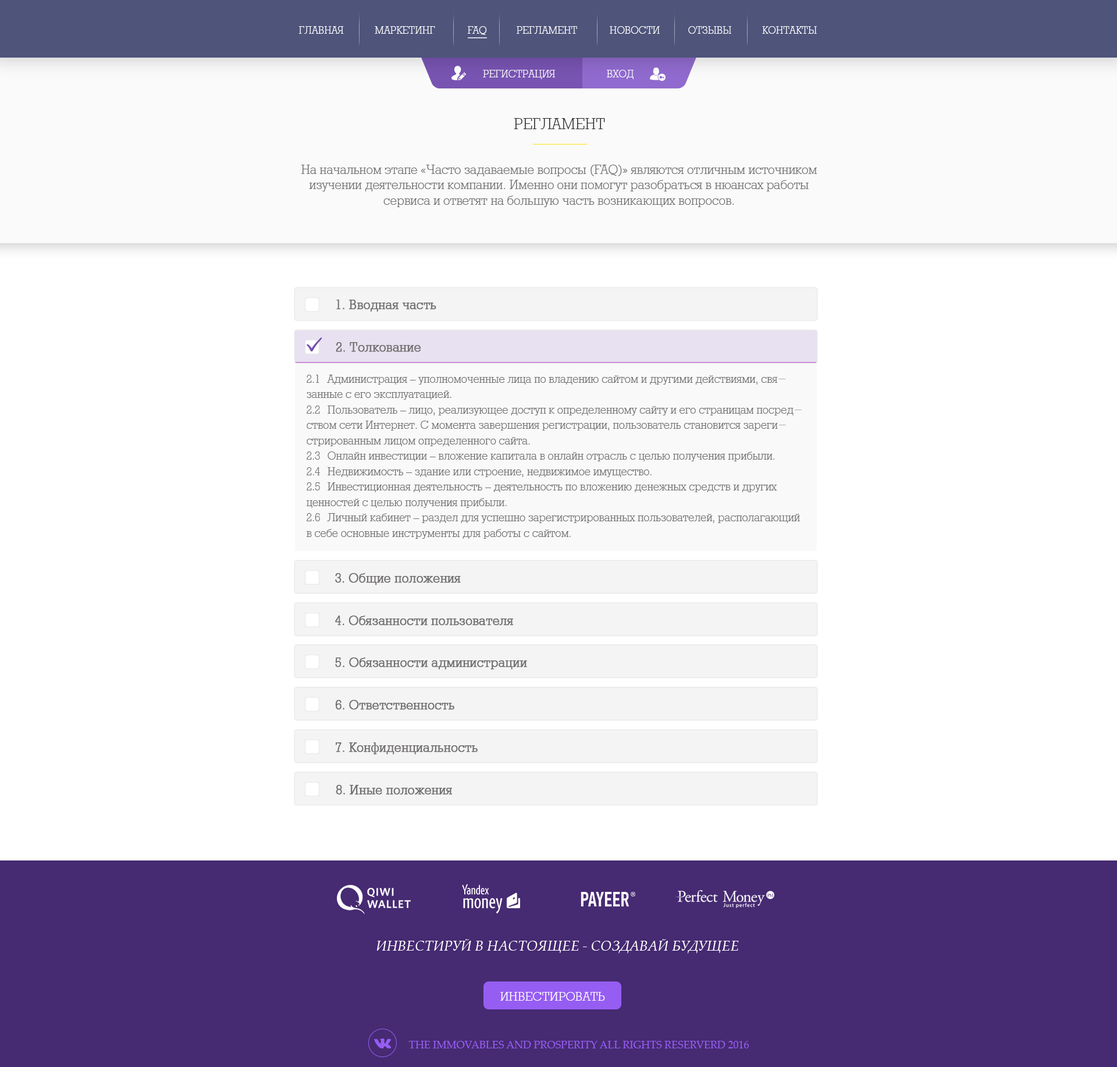
<style>
.page{position:relative;width:1117px;height:1067px;background:#ffffff}
.page>*{position:absolute;margin:0}
.t1{font:11.6px "Rodeo95";color:#ffffff;text-transform:uppercase}
.t2{font:17.5px "Rodeo95";color:#282828}
.t3{font:14.5px/15.4px "Rodeo95";color:#726f6f}
.t4{font:14.5px "Rodeo95";color:#726f6f;font-weight:bold}
.t5{font:12.8px/15.4px "Rodeo95";color:#726f6f}
.t6{font:14px "PalatinoLinotype-Italic";color:#ffffff;text-transform:uppercase}
.t7{font:14px "Rodeo95";color:#ffffff;text-transform:uppercase}
.t8{font:10.5px "PalatinoLinotype-Roman";color:#965df2;text-transform:uppercase}
</style>
<div class="page">
<p class="t1" style="left:299px;top:26px;width:45px;height:8px">Главная</p>
<p class="t1" style="left:375px;top:26px;width:60px;height:8px">МАРКЕТИНГ</p>
<p class="t1" style="left:467px;top:26px;width:20px;height:9px">FAQ</p>
<p class="t1" style="left:517px;top:26px;width:60px;height:8px">РЕГЛАМЕНТ</p>
<p class="t1" style="left:610px;top:26px;width:50px;height:8px">НОВОСТИ</p>
<p class="t1" style="left:688px;top:26px;width:43px;height:8px">Отзывы</p>
<p class="t1" style="left:762px;top:26px;width:55px;height:8px">КОНТАКТЫ</p>
<p class="t1" style="left:483px;top:70px;width:72px;height:9px">РЕГИСТРАЦИЯ</p>
<p class="t1" style="left:607px;top:70px;width:27px;height:9px">ВХОД</p>
<p class="t2" style="left:514px;top:118px;width:91px;height:11px">РЕГЛАМЕНТ</p>
<p class="t3" style="left:301px;top:165px;width:517px;height:42px;text-align:center">На начальном этапе «Часто задаваемые вопросы (FAQ)» являются отличным источником изучении деятельности компании. Именно они помогут разобраться в нюансах работы сервиса и ответят на большую часть возникающих вопросов.</p>
<p class="t4" style="left:336px;top:300px;width:100px;height:12px">1. Вводная часть</p>
<p class="t4" style="left:336px;top:342px;width:85px;height:10px">2. Толкование</p>
<p class="t5" style="left:307px;top:375px;width:495px;height:164px">2.1 Администрация – уполномоченные лица по владению сайтом и другими действиями, связанные с его эксплуатацией. <br>2.2 Пользователь – лицо, реализующее доступ к определенному сайту и его страницам посредством сети Интернет. С момента завершения регистрации, пользователь становится зарегистрированным лицом определенного сайта.<br>2.3 Онлайн инвестиции – вложение капитала в онлайн отрасль с целью получения прибыли.<br>2.4 Недвижимость – здание или строение, недвижимое имущество.<br>2.5 Инвестиционная деятельность – деятельность по вложению денежных средств и других ценностей с целью получения прибыли.<br>2.6 Личный кабинет – раздел для успешно зарегистрированных пользователей, располагающий в себе основные инструменты для работы с сайтом.</p>
<p class="t4" style="left:335px;top:573px;width:126px;height:12px">3. Общие положения</p>
<p class="t4" style="left:335px;top:616px;width:179px;height:10px">4. Обязанности пользователя</p>
<p class="t4" style="left:335px;top:658px;width:192px;height:12px">5. Обязанности администрации</p>
<p class="t4" style="left:335px;top:700px;width:119px;height:10px">6. Ответственность</p>
<p class="t4" style="left:336px;top:743px;width:142px;height:12px">7. Конфиденциальность</p>
<p class="t4" style="left:336px;top:785px;width:117px;height:10px">8. Иные положения</p>
<p class="t6" style="left:377px;top:939px;width:362px;height:15px">Инвестируй в настоящее - создавай будущее</p>
<p class="t7" style="left:500px;top:992px;width:105px;height:9px">ИНВЕСТИРОВАТЬ</p>
<p class="t8" style="left:409px;top:1041px;width:340px;height:8px">the immovables and prosperity ALL Rights reserverd 2016</p>
</div>
